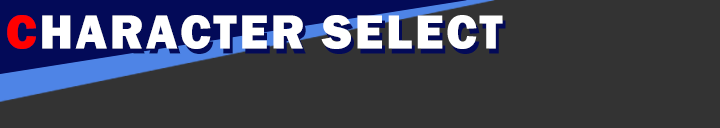
<style>
.page{position:relative;width:720px;height:128px;background:#333333}
.page>*{position:absolute;margin:0}
.t1{font:49.4px "FranklinGothic-Heavy";letter-spacing:0.05em;color:#ffffff}
.t2{font:49.4px "FranklinGothic-Heavy";letter-spacing:0.05em;color:#ff0000}
</style>
<div class="page">
<p class="t1" style="left:7px;top:15px;width:496px;height:34px"><span class="t2">C</span>HARACTER SELECT</p>
</div>
